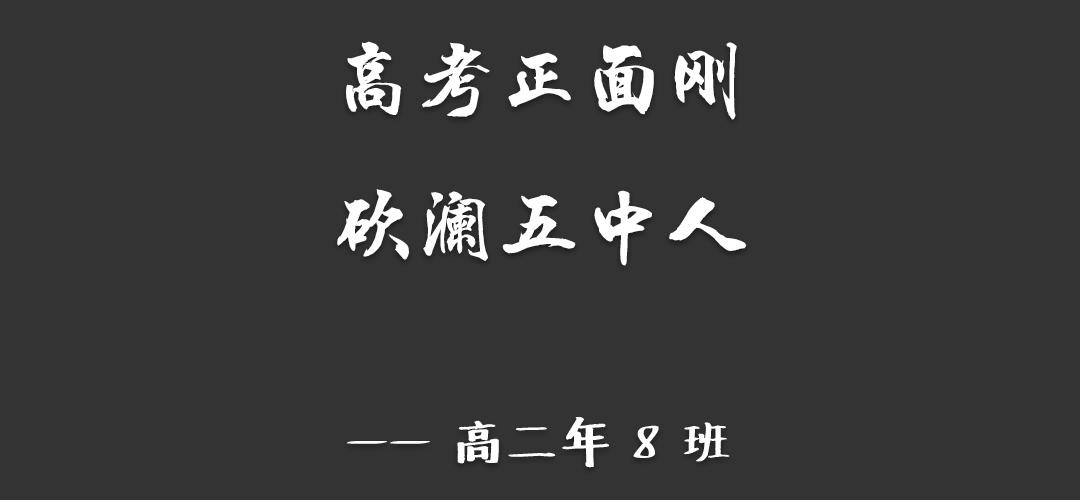
<style>
.page{position:relative;width:1080px;height:500px;background:#333333}
.page>*{position:absolute;margin:0}
.t1{font:83.3px "HYChengXingJ";color:#ffffff}
.t2{font:50px "Undefined";color:#ffffff}
</style>
<div class="page">
<p class="t1" style="left:337px;top:41px;width:410px;height:427px;text-align:center">高考正面刚<br>砍澜五中人<br><span class="t2"><br>—— 高二年 8 班</span></p>
</div>
